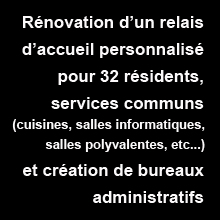
<style>
.page{position:relative;width:220px;height:220px;background:#000000}
.page>*{position:absolute;margin:0}
.t1{font:17px/27px "Arial-BoldMT";color:#fbf9f9}
.t2{font:13px/20px "Arial-BoldMT";color:#fbf9f9}
</style>
<div class="page">
<p class="t1" style="left:12px;top:16px;width:193px;height:187px;text-align:right">Rénovation d’un relais <br>d’accueil personnalisé <br>pour 32 résidents, <br>services communs <br><span class="t2">(cuisines, salles informatiques, <br>salles polyvalentes, etc...) <br></span>et création de bureaux <br>administratifs</p>
</div>
